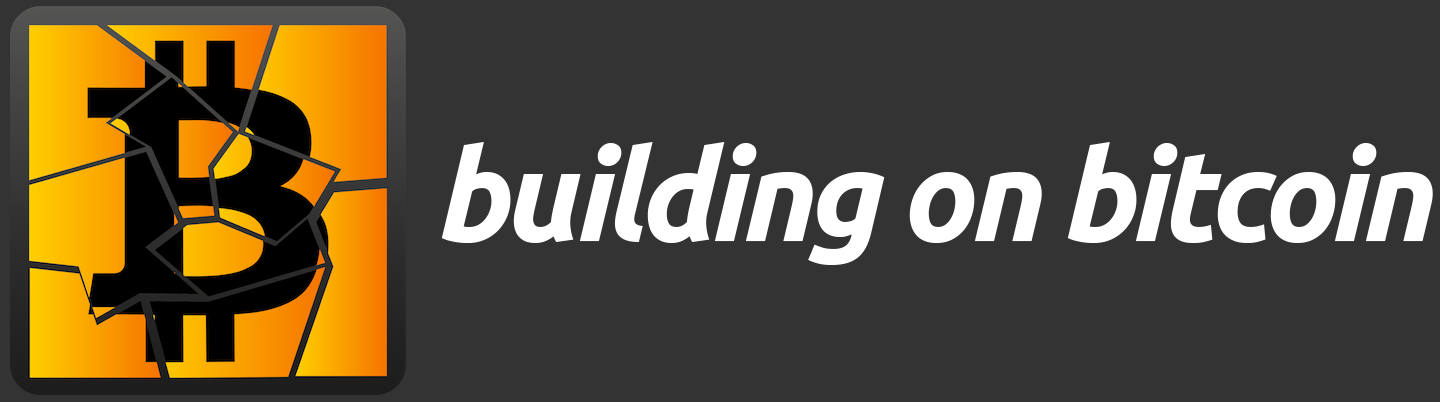
<style>
.page{position:relative;width:1440px;height:402px;background:#333333}
.page>*{position:absolute;margin:0}
.t1{font:128.1px "Ubuntu-BoldItalic";letter-spacing:-0.04em;color:#ffffff}
</style>
<div class="page">
<p class="t1" style="left:441px;top:142px;width:992px;height:123px">building on bitcoin</p>
</div>
